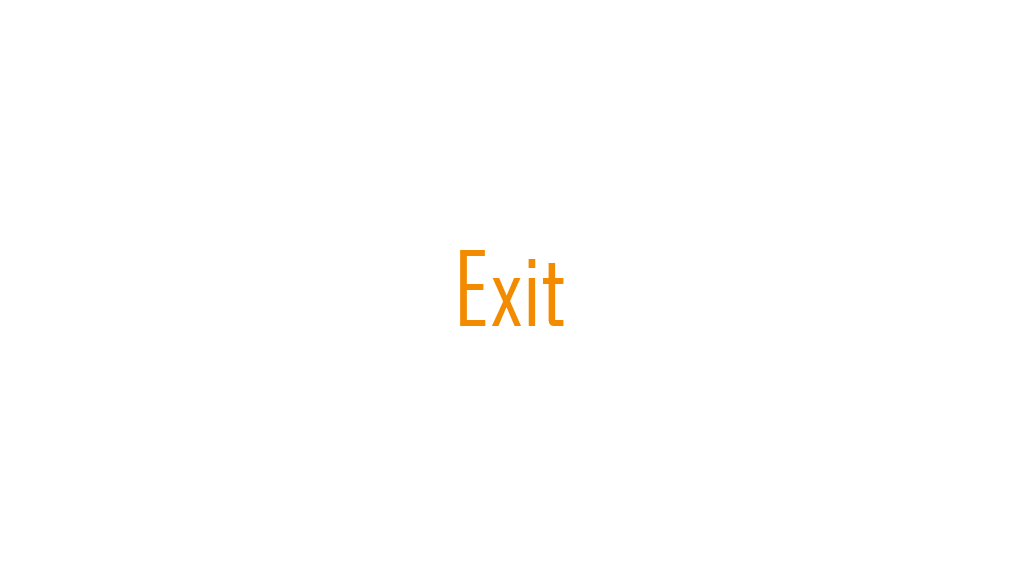
<style>
.page{position:relative;width:1024px;height:576px;background:#ffffff}
.page>*{position:absolute;margin:0}
.t1{font:100px "AgencyFB-Reg";color:#f28b00}
</style>
<div class="page">
<p class="t1" style="left:460px;top:250px;width:104px;height:76px">Exit</p>
</div>
